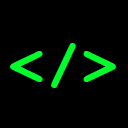
<style>
.page{position:relative;width:128px;height:128px;background:#000000}
.page>*{position:absolute;margin:0}
.t1{font:60px "Courier-Bold";color:#00ff2a}
</style>
<div class="page">
<p class="t1" style="left:10px;top:43px;width:106px;height:45px">&lt;/&gt;</p>
</div>
